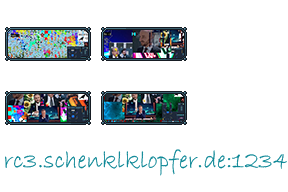
<style>
.page{position:relative;width:288px;height:192px;background:#ffffff}
.page>*{position:absolute;margin:0}
.t1{font:25px "BradleyHandITC";color:#088594}
</style>
<div class="page">
<p class="t1" style="left:5px;top:149px;width:282px;height:27px">rc3.schenklklopfer.de:1234</p>
</div>
